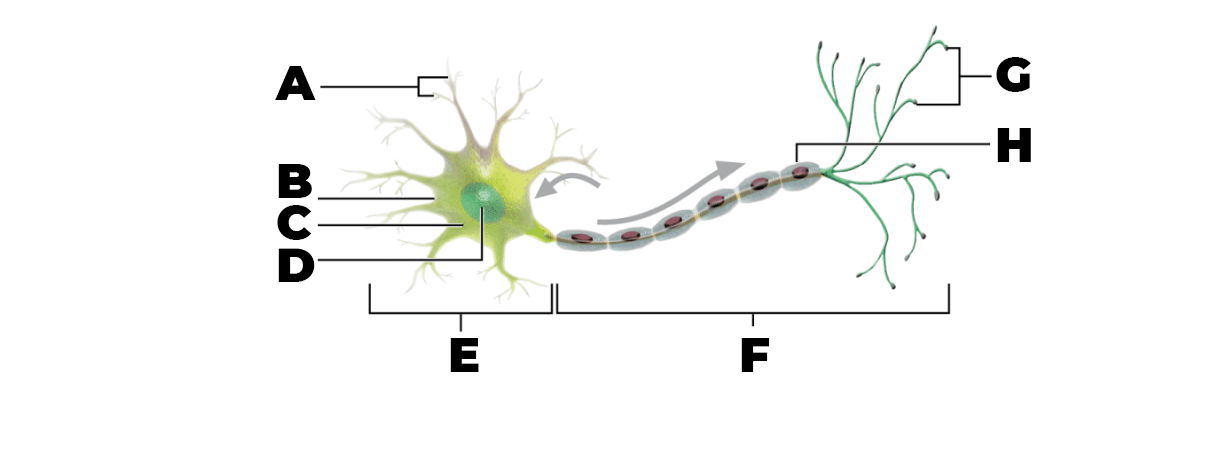
<style>
.page{position:relative;width:1221px;height:452px;background:#ffffff}
.page>*{position:absolute;margin:0}
.t1{font:48px/14px "Montserrat-Black";color:#000000}
.t2{font:48px "Montserrat-Black";color:#000000}
</style>
<div class="page">
<p class="t1" style="left:996px;top:57px;width:35px;height:105px">G<br><br><br><br><br>H</p>
<p class="t1" style="left:275px;top:66px;width:41px;height:216px">A<br><br><br><br><br><br><br>B<br><br><br>C<br><br><br>D</p>
<p class="t2" style="left:450px;top:338px;width:319px;height:34px">E                  F</p>
</div>
